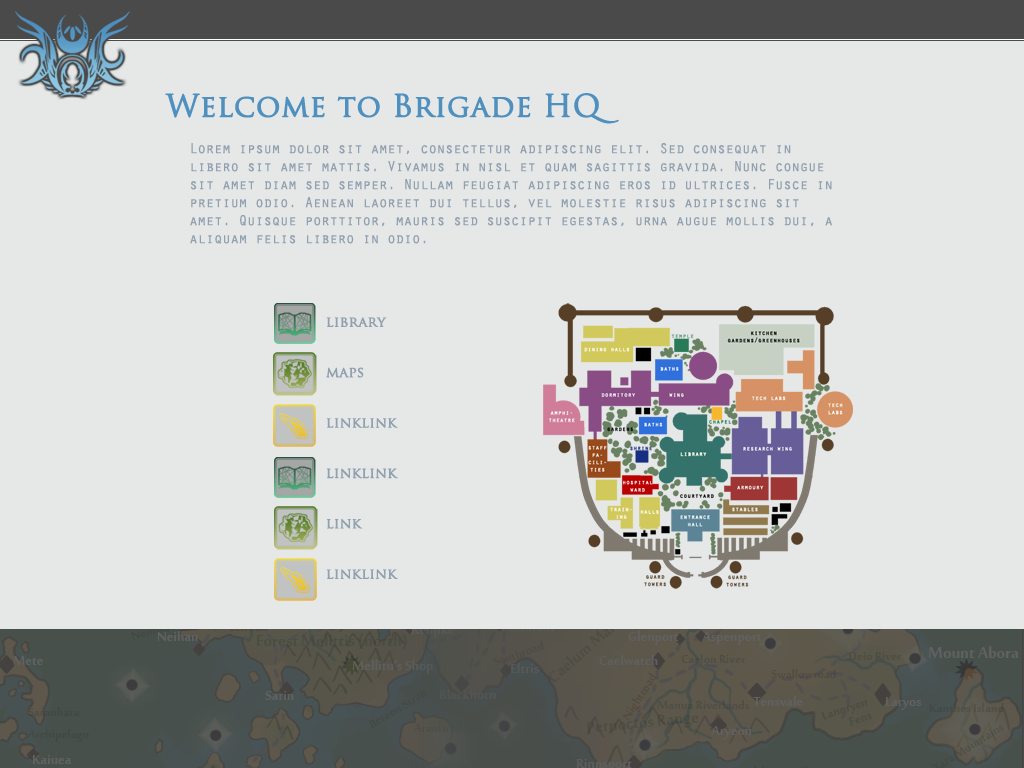
<style>
.page{position:relative;width:1024px;height:768px;background:#e6e8e8}
.page>*{position:absolute;margin:0}
.t1{font:30px "TrajanPro-Regular";color:#4f90bf;font-weight:bold}
.t2{font:15px "OratorStd";letter-spacing:-0.05em;color:#91a0af}
.t3{font:14px "TrajanPro-Regular";color:#91a0af;font-weight:bold}
</style>
<div class="page">
<p class="t1" style="left:165px;top:93px;width:454px;height:31px">Welcome to Brigade HQ</p>
<p class="t2" style="left:190px;top:143px;width:642px;height:101px">Lorem ipsum dolor sit amet, consectetur adipiscing elit. Sed consequat in libero sit amet mattis. Vivamus in nisl et quam sagittis gravida. Nunc congue sit amet diam sed semper. Nullam feugiat adipiscing eros id ultrices. Fusce in pretium odio. Aenean laoreet dui tellus, vel molestie risus adipiscing sit amet. Quisque porttitor, mauris sed suscipit egestas, urna augue mollis dui, a aliquam felis libero in odio.</p>
<p class="t3" style="left:326px;top:317px;width:72px;height:262px">library<br><br><br>maps<br><br><br>linklink<br><br><br>linklink<br><br><br>link<br><br><br>linklink</p>
</div>
